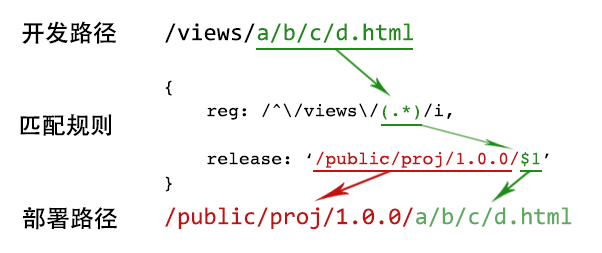
<style>
.page{position:relative;width:602px;height:253px;background:#ffffff}
.page>*{position:absolute;margin:0}
.t1{font:24px "AdobeHeitiStd-Regular";color:#000000}
.t2{font:24px "Consolas";color:#1f8c17}
.t3{font:24px "Consolas";color:#000000}
.t4{font:18px/24px "Courier";color:#c31010}
.t5{font:18px/24px "Courier";color:#000000}
.t6{font:18px/48px "Courier";color:#000000}
.t7{font:18px/48px "Courier";color:#1f8c17}
.t8{font:18px/24px "Courier";color:#1f8c17}
.t9{font:24px "Consolas";color:#c31010}
.t10{font:24px "Consolas";color:#5daa60}
</style>
<div class="page">
<p class="t1" style="left:22px;top:21px;width:94px;height:23px">开发路径</p>
<p class="t2" style="left:165px;top:23px;width:248px;height:20px"><span class="t3">/views/</span>a/b/c/d.html</p>
<p class="t4" style="left:165px;top:80px;width:384px;height:112px"><span class="t5">{<br></span><span class="t6">    reg: /^\/views\/</span><span class="t7">(.*)</span><span class="t6">/i,<br></span><span class="t5">    release: ‘</span>/public/proj/1.0.0/<span class="t8">$1</span><span class="t5">’  <br>}</span></p>
<p class="t1" style="left:20px;top:114px;width:92px;height:22px">匹配规则</p>
<p class="t1" style="left:23px;top:207px;width:94px;height:23px">部署路径</p>
<p class="t9" style="left:165px;top:207px;width:407px;height:23px">/public/proj/1.0.0/<span class="t10">a/b/c/d.html</span></p>
</div>
